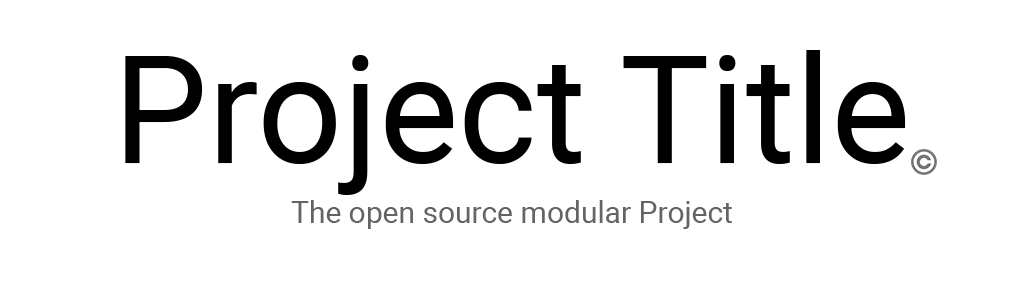
<style>
.page{position:relative;width:1024px;height:300px;background:#ffffff}
.page>*{position:absolute;margin:0}
.t1{font:150px "Roboto-Regular";color:#000000}
.t2{font:30px "Roboto-Regular";color:#646464}
</style>
<div class="page">
<p class="t1" style="left:125px;top:50px;width:781px;height:145px">Project Title</p>
<p class="t2" style="left:291px;top:200px;width:441px;height:29px">The open source modular Project</p>
</div>
